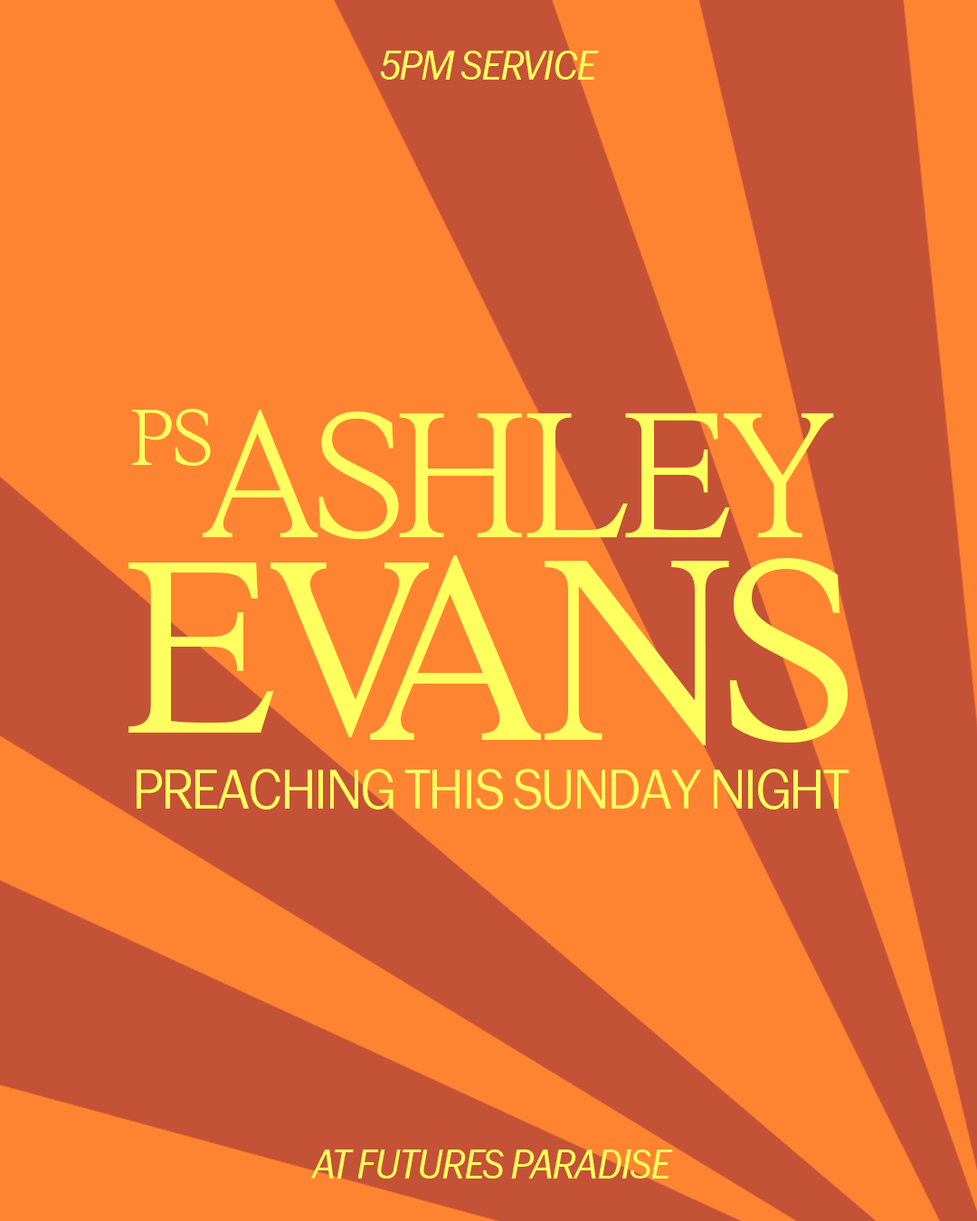
<style>
.page{position:relative;width:977px;height:1221px;background:#ff8432}
.page>*{position:absolute;margin:0}
.t1{font:74.2px "GalGothic-Italic";letter-spacing:-0.04em;color:#ffff5f}
.t2{font:291.2px/84.2px "RyhmesText-UltraLight";letter-spacing:-0.04em;color:#ffff5f}
.t3{font:399.7px/159.2px "RyhmesText-Light";letter-spacing:-0.02em;color:#ffff5f}
.t4{font:421.4px/159.2px "RyhmesText-Light";letter-spacing:-0.04em;color:#ffff5f}
.t5{font:128.7px "RyhmesText-UltraLight";letter-spacing:-0.04em;color:#ffff5f}
.t6{font:56.9px "GalGothic-Regular";letter-spacing:-0.04em;color:#ffff5f;scale:0.96 1}
</style>
<div class="page">
<p class="t1" style="left:380px;top:51px;width:219px;height:29px">5PM SERVICE</p>
<p class="t2" style="left:128px;top:410px;width:719px;height:335px;text-align:center">ASHLEY <br><span class="t3">EV</span><span class="t4">ANS</span></p>
<p class="t5" style="left:132px;top:409px;width:79px;height:57px">PS</p>
<p class="t6" style="left:137px;top:769px;width:712px;height:40px">PREACHING THIS SUNDAY NIGHT</p>
<p class="t1" style="left:310px;top:1149px;width:363px;height:29px">AT FUTURES PARADISE</p>
</div>
